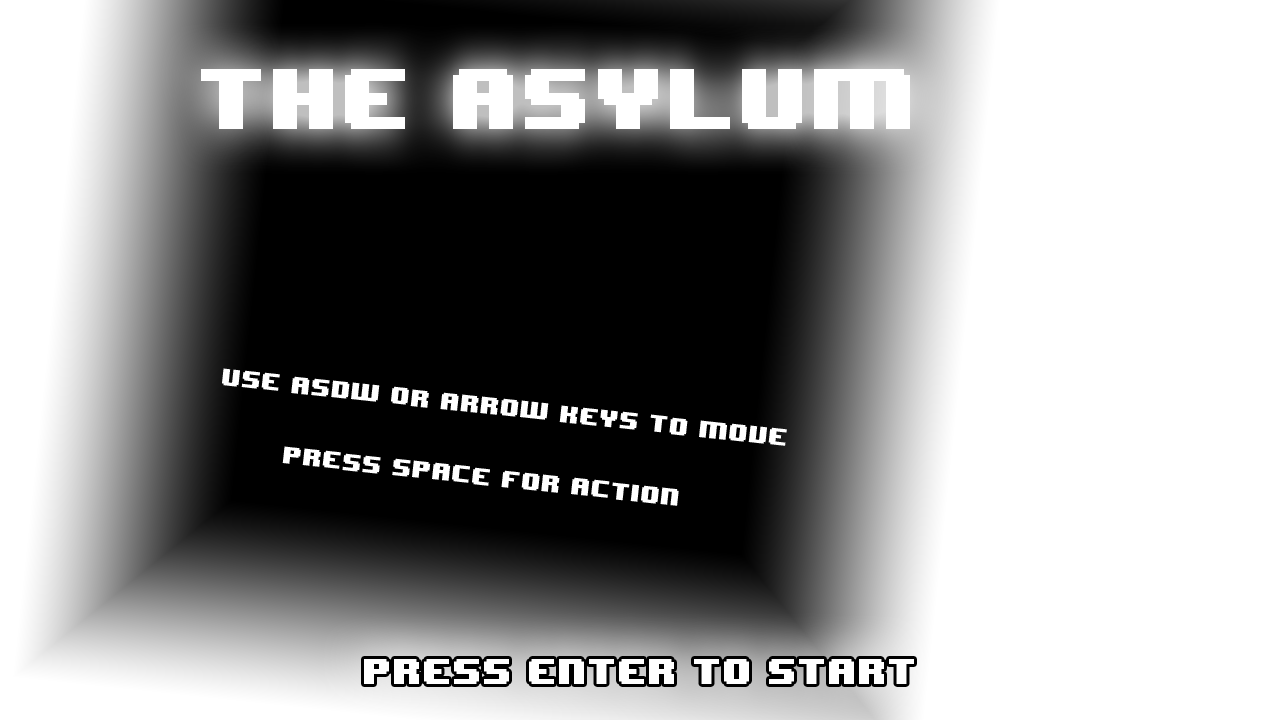
<style>
.page{position:relative;width:1280px;height:720px;background:#ffffff}
.page>*{position:absolute;margin:0}
.t1{font:72px "8BITWONDERNominal";color:#ffffff}
.t2{font:20px "8BITWONDERNominal";color:#ffffff}
</style>
<div class="page">
<p class="t1" style="left:201px;top:69px;width:709px;height:60px">THE ASYLUM</p>
<p class="t2" style="left:222px;top:368px;width:565px;height:78px;rotate:6deg">USE ASDW OR ARROW KEYS TO MOVE</p>
<p class="t2" style="left:282px;top:446px;width:397px;height:60px;rotate:6deg">PRESS SPACE FOR ACTION</p>
</div>
